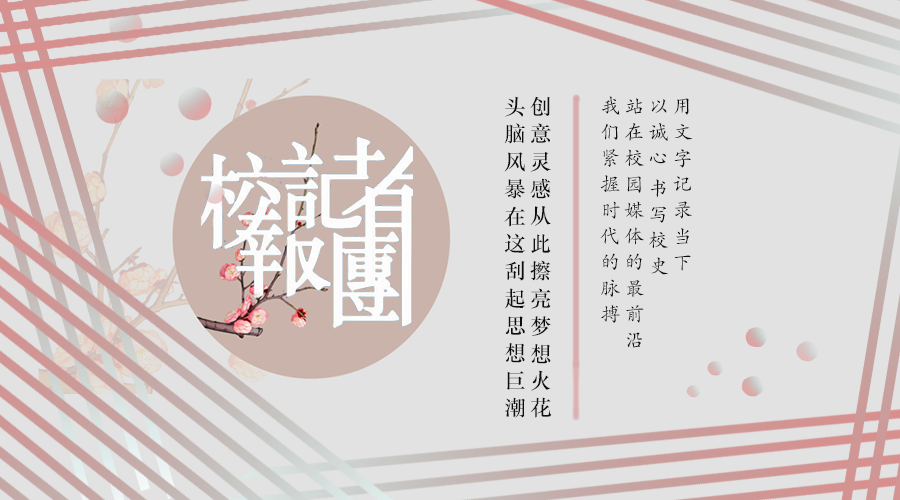
<style>
.page{position:relative;width:900px;height:500px;background:#e2e2e2}
.page>*{position:absolute;margin:0}
.t1{font:20px "STKaiti";color:#0e0e0e}
.t2{font:21.3px "STZhongsong";color:#0e0e0e}
</style>
<div class="page">
<p class="t1" style="left:504px;top:96px;width:189px;height:322px"><span class="t2"><br></span>用文字记录当下<br>以诚心书写校史<br>站在校园媒体的最前沿<br>我们紧握时代的脉搏<br><br><br><span class="t2">创意灵感从此擦亮梦想火花<br>头脑风暴在这刮起思想巨潮</span></p>
</div>
